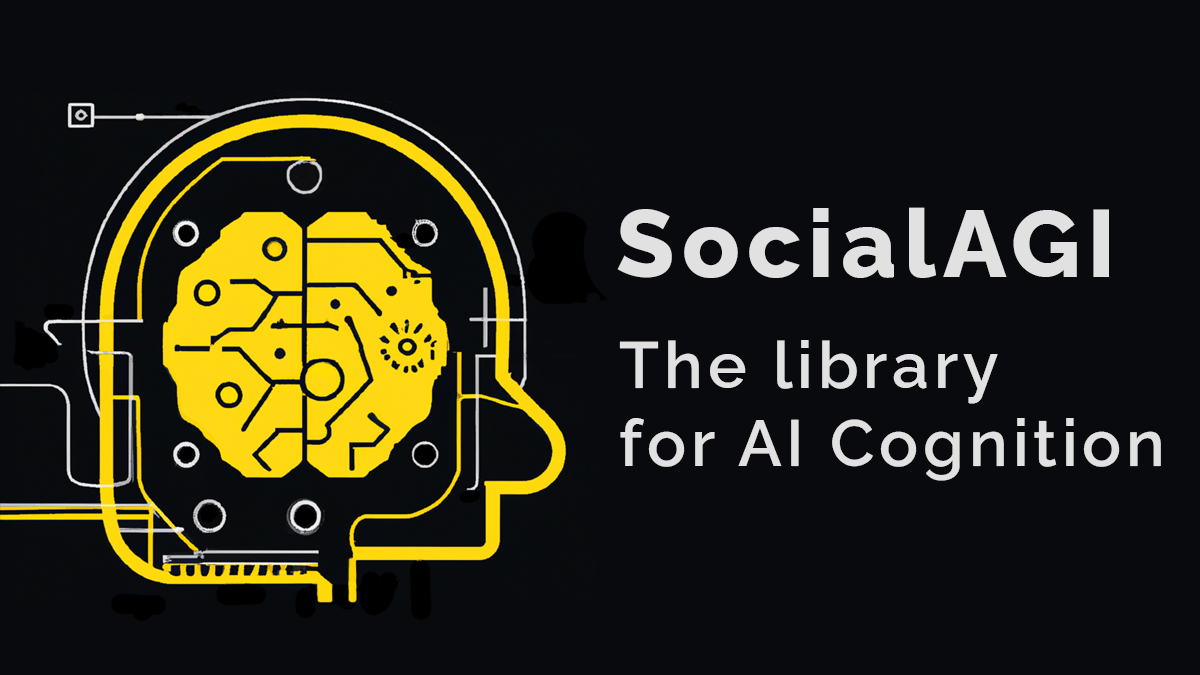
<style>
.page{position:relative;width:1200px;height:675px;background:#080a0d}
.page>*{position:absolute;margin:0}
.t1{font:95px "RalewayRoman-ExtraBold";letter-spacing:0.075em;color:#e1e1e2}
.t2{font:65px "RalewayRoman-SemiBold";letter-spacing:0.075em;color:#e1e1e2}
</style>
<div class="page">
<p class="t1" style="left:617px;top:207px;width:492px;height:71px">SocialAGI</p>
<p class="t2" style="left:619px;top:340px;width:542px;height:141px">The library<br>for AI Cognition</p>
</div>
